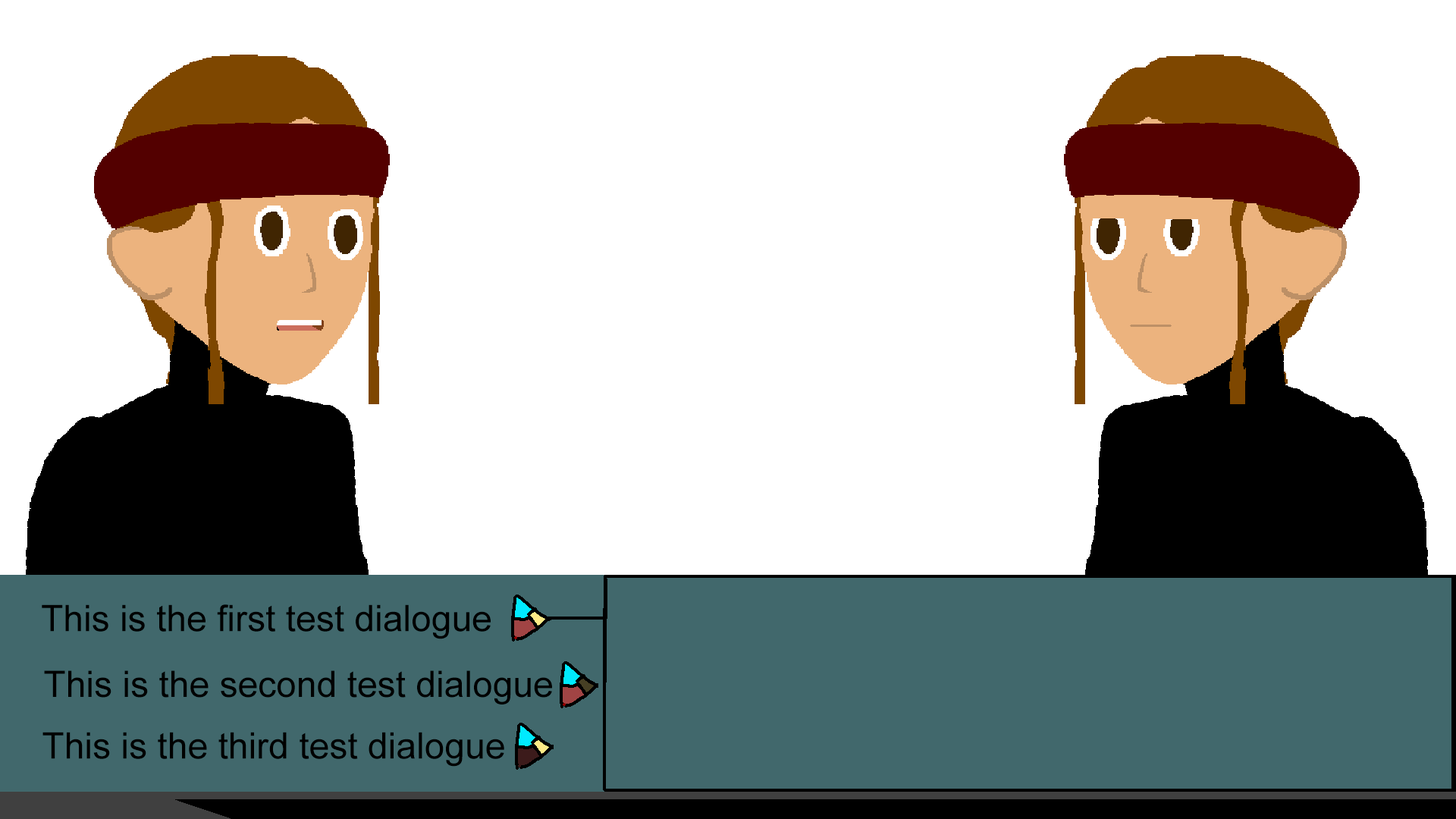
<style>
.page{position:relative;width:1456px;height:819px;background:#ffffff}
.page>*{position:absolute;margin:0}
.t1{font:36.4px "ArialMT";color:#000000}
</style>
<div class="page">
<p class="t1" style="left:42px;top:604px;width:449px;height:35px">This is the first test dialogue</p>
<p class="t1" style="left:44px;top:670px;width:508px;height:34px">This is the second test dialogue</p>
<p class="t1" style="left:42px;top:732px;width:462px;height:35px">This is the third test dialogue</p>
</div>
